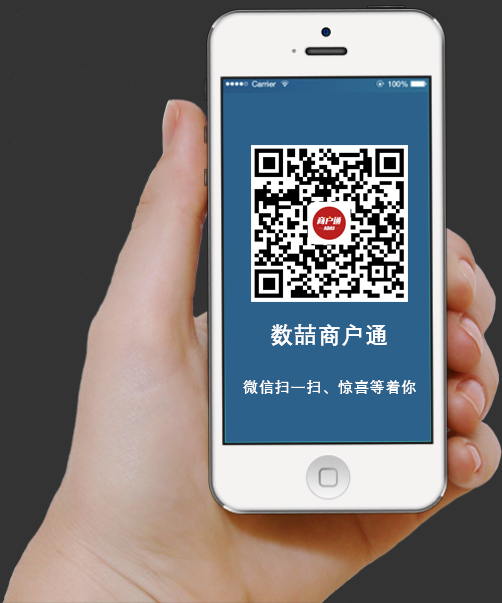
<style>
.page{position:relative;width:502px;height:603px;background:#333333}
.page>*{position:absolute;margin:0}
.t1{font:22.6px "DengXian-Bold";letter-spacing:0.05em;color:#fefefe}
.t2{font:15.1px "DengXian-Bold";letter-spacing:0.05em;color:#fefefe}
</style>
<div class="page">
<p class="t1" style="left:271px;top:324px;width:117px;height:22px">数喆商户通</p>
<p class="t2" style="left:243px;top:380px;width:173px;height:14px">微信扫一扫、惊喜等着你</p>
</div>
